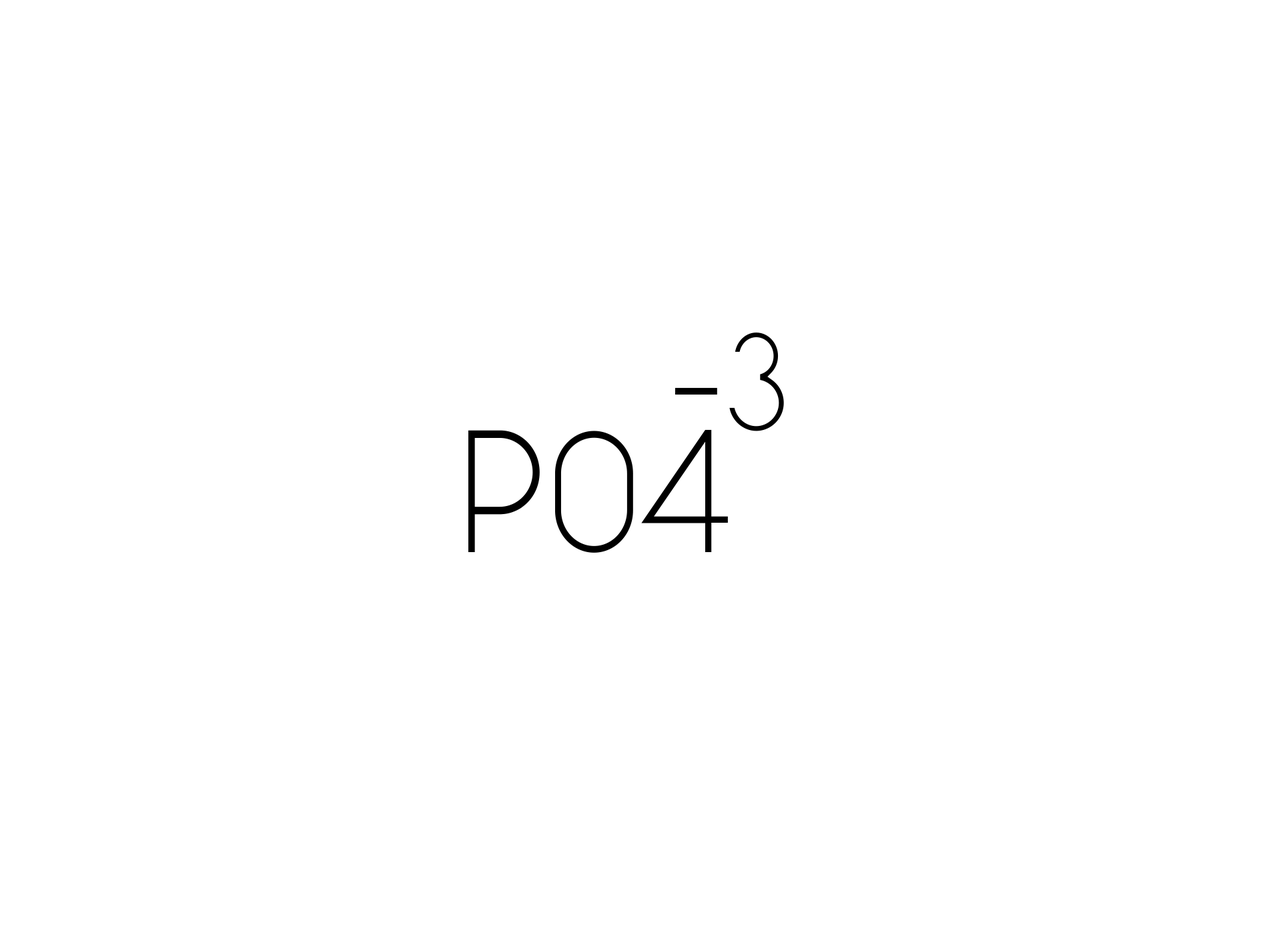
<style>
.page{position:relative;width:1261px;height:946px;background:#ffffff}
.page>*{position:absolute;margin:0}
.t1{font:138.9px "Alcubierre";color:#000000;scale:0.95 1}
.t2{font:162.1px "Alcubierre";color:#000000;scale:0.95 1}
.t3{font:173.6px "Alcubierre";color:#000000;scale:0.95 1}
</style>
<div class="page">
<p class="t1" style="left:729px;top:332px;width:55px;height:99px">3</p>
<p class="t2" style="left:675px;top:388px;width:42px;height:6px">-</p>
<p class="t3" style="left:468px;top:429px;width:260px;height:123px">P04</p>
</div>
